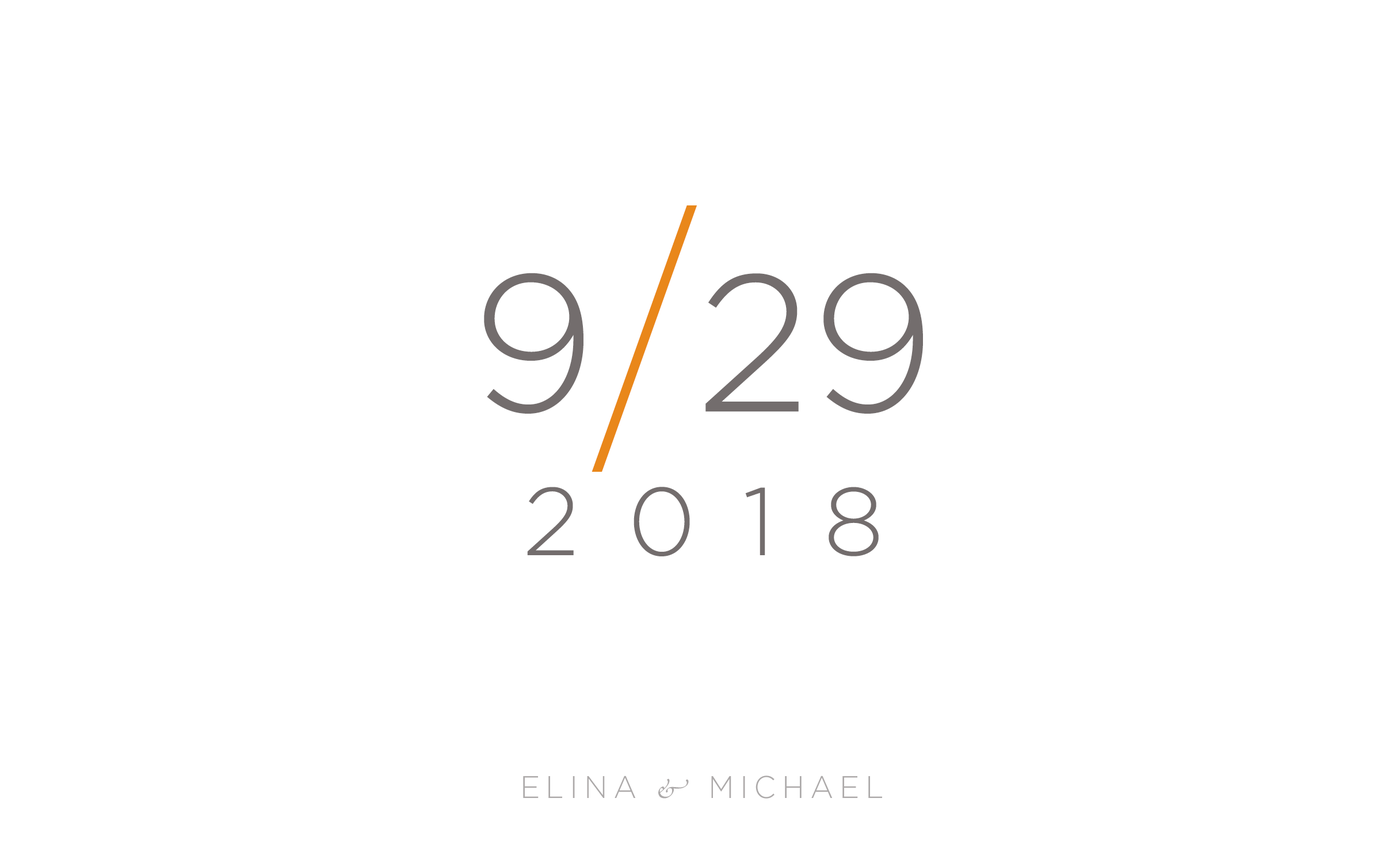
<style>
.page{position:relative;width:1381px;height:863px;background:#ffffff}
.page>*{position:absolute;margin:0}
.t1{font:95.9px/143.9px "Gotham-Light";letter-spacing:0.5em;color:#736d6d}
.t2{font:194.2px/143.9px "Gotham-Light";color:#736d6d}
.t3{font:287.8px/143.9px "Gotham-Light";color:#e9871a;scale:0.7 1}
.t4{font:31.2px "Gotham-Light";letter-spacing:0.2em;color:#aca9a9;scale:0.95 1}
.t5{font:31.2px "PoeticaStd";letter-spacing:0.2em;color:#aca9a9;scale:0.95 1}
</style>
<div class="page">
<p class="t1" style="left:484px;top:205px;width:439px;height:352px;text-align:center"><span class="t2">9</span><span class="t3">/</span><span class="t2">29<br></span>2018</p>
<p class="t4" style="left:523px;top:776px;width:359px;height:23px">ELINA <span class="t5">&amp;</span> MICHAEL</p>
</div>
